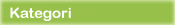
<style>
.page{position:relative;width:175px;height:25px;background:#96c04a}
.page>*{position:absolute;margin:0}
.t1{font:14.2px "ArialRoundedMTBold";color:#fdfcfc;scale:1.07 1}
</style>
<div class="page">
<p class="t1" style="left:10px;top:7px;width:61px;height:14px">Kategori</p>
</div>
